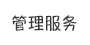
<style>
.page{position:relative;width:90px;height:45px;background:#ffffff}
.page>*{position:absolute;margin:0}
.t1{font:16.7px "HannotateSC-W7";color:#383838}
</style>
<div class="page">
<p class="t1" style="left:12px;top:15px;width:65px;height:16px">管理服务</p>
</div>
